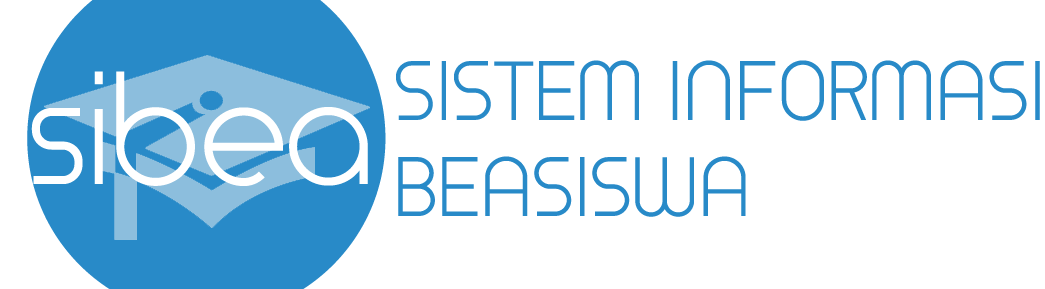
<style>
.page{position:relative;width:1045px;height:289px;background:#ffffff}
.page>*{position:absolute;margin:0}
.t1{font:80px "TimeBurner";color:#288ac8}
</style>
<div class="page">
<p class="t1" style="left:396px;top:60px;width:644px;height:157px">SISTEM INFORMASI <br>BEASISWA</p>
</div>
